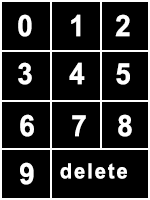
<style>
.page{position:relative;width:150px;height:200px;background:#000000}
.page>*{position:absolute;margin:0}
.t1{font:29.4px "Arial-BoldMT";letter-spacing:0.1em;color:#ffffff;scale:0.95 1}
.t2{font:21px "Arial-BoldMT";letter-spacing:0.1em;color:#ffffff;scale:0.95 1}
</style>
<div class="page">
<p class="t1" style="left:18px;top:14px;width:14px;height:23px">0</p>
<p class="t1" style="left:71px;top:14px;width:10px;height:23px">1</p>
<p class="t1" style="left:115px;top:14px;width:15px;height:23px">2</p>
<p class="t1" style="left:18px;top:62px;width:14px;height:23px">3</p>
<p class="t1" style="left:69px;top:62px;width:16px;height:23px">4</p>
<p class="t1" style="left:116px;top:63px;width:14px;height:22px">5</p>
<p class="t1" style="left:20px;top:114px;width:14px;height:23px">6</p>
<p class="t1" style="left:72px;top:115px;width:14px;height:22px">7</p>
<p class="t1" style="left:118px;top:114px;width:14px;height:23px">8</p>
<p class="t1" style="left:20px;top:162px;width:14px;height:23px">9</p>
<p class="t2" style="left:60px;top:163px;width:67px;height:16px">delete</p>
</div>
